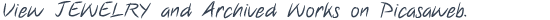
<style>
.page{position:relative;width:550px;height:20px;background:#ffffff}
.page>*{position:absolute;margin:0}
.t1{font:20px "Notethis";letter-spacing:0.05em;color:#364252}
</style>
<div class="page">
<p class="t1" style="left:3px;top:1px;width:464px;height:18px">View JEWELRY and Archived Works on Picasaweb.</p>
</div>
